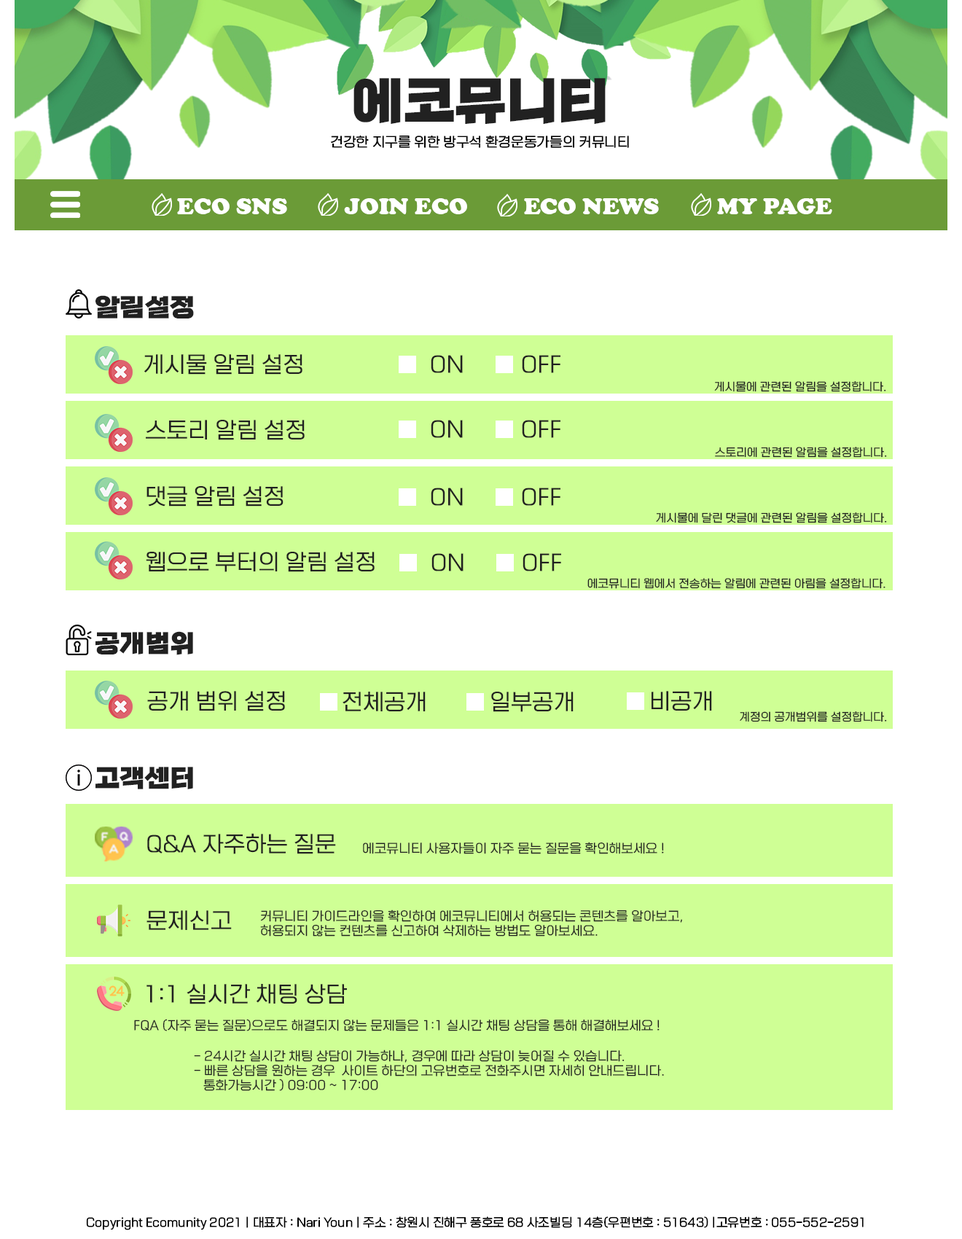
<style>
.page{position:relative;width:962px;height:1239px;background:#ffffff}
.page>*{position:absolute;margin:0}
.t1{font:52.5px "RixYeoljeongdoR";color:#212121}
.t2{font:13.1px "RixRakSansPR";color:#000000}
.t3{font:24.1px "CooperBlack";color:#ffffff}
.t4{font:25.5px "RixYeoljeongdoR";color:#212121}
.t5{font:21.9px "RixRakSansR";color:#212121}
.t6{font:10.9px "RixRakSansR";color:#212121}
.t7{font:12.4px "RixRakSansR";color:#212121}
.t8{font:11.7px "RixRakSansPR";color:#000000}
</style>
<div class="page">
<p class="t1" style="left:354px;top:78px;width:252px;height:47px">에코뮤니티</p>
<p class="t2" style="left:330px;top:136px;width:299px;height:12px">건강한 지구를 위한 방구석 환경운동가들의 커뮤니티</p>
<p class="t3" style="left:177px;top:198px;width:110px;height:16px">ECO SNS</p>
<p class="t3" style="left:344px;top:198px;width:123px;height:16px">JOIN ECO</p>
<p class="t3" style="left:524px;top:198px;width:135px;height:16px">ECO NEWS</p>
<p class="t3" style="left:717px;top:198px;width:115px;height:16px">MY PAGE</p>
<p class="t4" style="left:95px;top:295px;width:99px;height:24px">알림설정</p>
<p class="t5" style="left:144px;top:354px;width:159px;height:21px">게시물 알림 설정</p>
<p class="t5" style="left:431px;top:355px;width:32px;height:18px">ON</p>
<p class="t5" style="left:522px;top:355px;width:39px;height:18px">OFF</p>
<p class="t6" style="left:714px;top:381px;width:172px;height:11px">게시물에 관련된 알림을 설정합니다.</p>
<p class="t5" style="left:146px;top:420px;width:159px;height:20px">스토리 알림 설정</p>
<p class="t5" style="left:431px;top:420px;width:32px;height:18px">ON</p>
<p class="t5" style="left:522px;top:420px;width:39px;height:18px">OFF</p>
<p class="t6" style="left:715px;top:447px;width:172px;height:11px">스토리에 관련된 알림을 설정합니다.</p>
<p class="t5" style="left:147px;top:486px;width:137px;height:21px">댓글 알림 설정</p>
<p class="t5" style="left:431px;top:488px;width:32px;height:18px">ON</p>
<p class="t5" style="left:522px;top:488px;width:39px;height:18px">OFF</p>
<p class="t6" style="left:656px;top:512px;width:231px;height:11px">게시물에 달린 댓글에 관련된 알림을 설정합니다.</p>
<p class="t5" style="left:146px;top:552px;width:229px;height:20px">웹으로 부터의 알림 설정</p>
<p class="t5" style="left:432px;top:553px;width:32px;height:19px">ON</p>
<p class="t5" style="left:523px;top:553px;width:38px;height:19px">OFF</p>
<p class="t6" style="left:588px;top:578px;width:298px;height:11px">에코뮤니티 웹에서 전송하는 알림에 관련된 아림을 설정합니다.</p>
<p class="t4" style="left:95px;top:631px;width:98px;height:24px">공개범위</p>
<p class="t5" style="left:147px;top:691px;width:138px;height:20px">공개 범위 설정</p>
<p class="t5" style="left:343px;top:692px;width:83px;height:19px">전체공개</p>
<p class="t5" style="left:491px;top:692px;width:83px;height:20px">일부공개</p>
<p class="t5" style="left:652px;top:691px;width:60px;height:20px">비공개</p>
<p class="t6" style="left:740px;top:711px;width:147px;height:11px">계정의 공개범위를 설정합니다.</p>
<p class="t4" style="left:95px;top:767px;width:98px;height:22px">고객센터</p>
<p class="t5" style="left:147px;top:833px;width:189px;height:21px">Q&amp;A 자주하는 질문</p>
<p class="t7" style="left:363px;top:842px;width:301px;height:12px">에코뮤니티 사용자들이 자주 묻는 질문을 확인해보세요 !</p>
<p class="t5" style="left:147px;top:910px;width:85px;height:20px">문제신고</p>
<p class="t7" style="left:260px;top:910px;width:422px;height:27px;text-align:right">커뮤니티 가이드라인을 확인하여 에코뮤니티에서 허용되는 콘텐츠를 알아보고, <br>허용되지 않는 컨텐츠를 신고하여 삭제하는 방법도 알아보세요.</p>
<p class="t5" style="left:147px;top:984px;width:200px;height:21px">1:1 실시간 채팅 상담</p>
<p class="t7" style="left:134px;top:1019px;width:526px;height:12px">FQA (자주 묻는 질문)으로도 해결되지 않는 문제들은 1:1 실시간 채팅 상담을 통해 해결해보세요 !</p>
<p class="t7" style="left:194px;top:1050px;width:470px;height:41px;text-align:right">- 24시간 실시간 채팅 상담이 가능하나, 경우에 따라 상담이 늦어질 수 있습니다.<br>- 빠른 상담을 원하는 경우  사이트 하단의 고유번호로 전화주시면 자세히 안내드립니다.<br>   통화가능시간 ) 09:00 ~ 17:00</p>
<p class="t8" style="left:86px;top:1217px;width:778px;height:13px">Copyright Ecomunity 2021 | 대표자 : Nari Youn | 주소 : 창원시 진해구 풍호로 68 사조빌딩 14층(우편번호 : 51643) |고유번호 : 055-552-2591</p>
</div>
